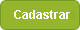
<style>
.page{position:relative;width:80px;height:30px;background:#94b52c}
.page>*{position:absolute;margin:0}
.t1{font:12px "Arial-BoldMT";color:#fefefe}
</style>
<div class="page">
<p class="t1" style="left:14px;top:10px;width:56px;height:9px">Cadastrar</p>
</div>
